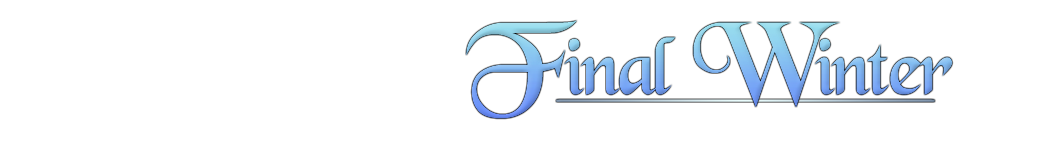
<style>
.page{position:relative;width:1042px;height:142px;background:#ffffff}
.page>*{position:absolute;margin:0}
.t1{font:85px "BlackChancery";letter-spacing:-0.035em}
.t2{font:110px "BlackChancery";letter-spacing:-0.035em}
</style>
<div class="page">
<p class="t1" style="left:466px;top:20px;width:487px;height:99px"><span class="t2">F</span>inal<span class="t2"> W</span>inter</p>
</div>
